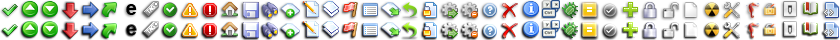
<style>
.page{position:relative;width:840px;height:40px;background:#ffffff}
.page>*{position:absolute;margin:0}
.t1{font:20px "Arial-BoldMT";color:#000000}
</style>
<div class="page">
<p class="t1" style="left:126px;top:24px;width:11px;height:12px">e</p>
</div>
